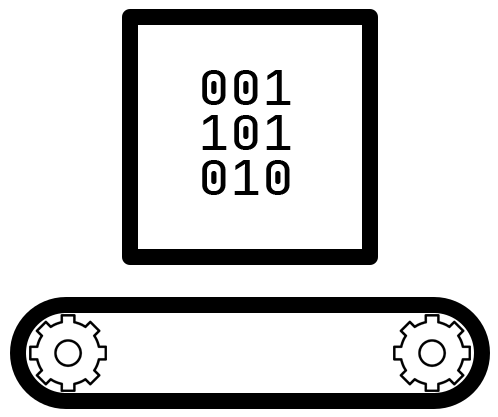
<style>
.page{position:relative;width:498px;height:417px;background:#ffffff}
.page>*{position:absolute;margin:0}
.t1{font:48px "JetBrainsMono-Regular";color:#000000;scale:1.1 1}
</style>
<div class="page">
<p class="t1" style="left:202px;top:70px;width:89px;height:35px">001</p>
<p class="t1" style="left:202px;top:115px;width:89px;height:35px">101</p>
<p class="t1" style="left:202px;top:160px;width:88px;height:35px">010</p>
</div>
